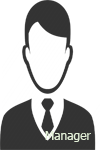
<style>
.page{position:relative;width:100px;height:150px;background:#ffffff}
.page>*{position:absolute;margin:0}
.t1{font:12px "Tahoma";color:#e4f1d9}
</style>
<div class="page">
<p class="t1" style="left:45px;top:131px;width:46px;height:11px">Manager</p>
</div>
